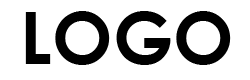
<style>
.page{position:relative;width:250px;height:80px;background:#ffffff}
.page>*{position:absolute;margin:0}
.t1{font:72px "CenturyGothic-Bold";color:#000000}
</style>
<div class="page">
<p class="t1" style="left:25px;top:11px;width:206px;height:54px">LOGO</p>
</div>
